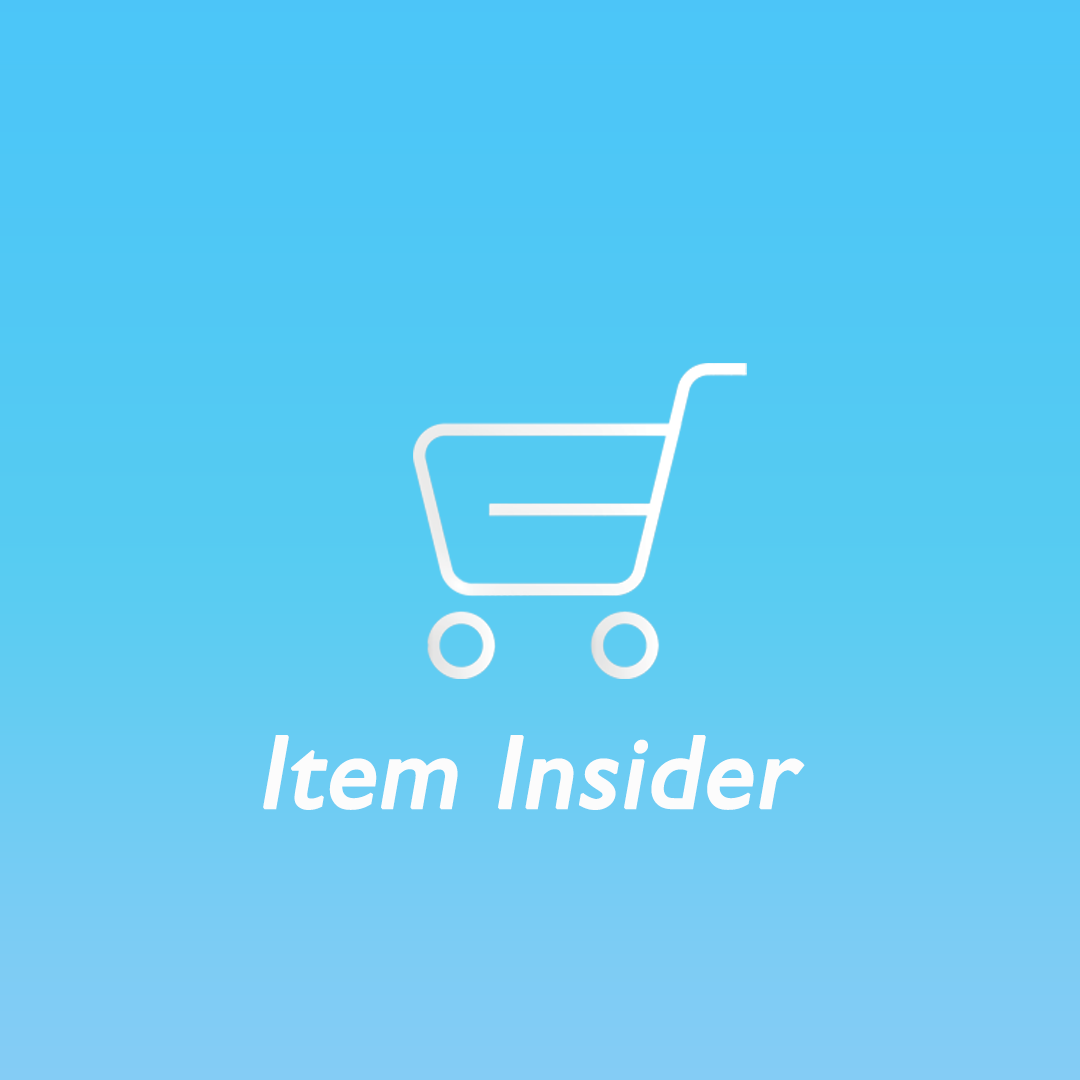
<style>
.page{position:relative;width:1080px;height:1080px}
.page>*{position:absolute;margin:0}
.t1{font:104.2px "GillSans";color:#fcfcfc;font-weight:bold;font-style:italic}
</style>
<div class="page">
<p class="t1" style="left:263px;top:735px;width:542px;height:75px">Item Insider</p>
</div>
